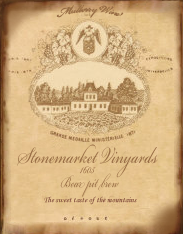
<style>
.page{position:relative;width:183px;height:234px}
.page>*{position:absolute;margin:0}
.t1{font:16px "BickhamScriptPro-Regular";color:#986d44;scale:0.67 1}
.t2{font:36px "BickhamScriptPro-Regular";color:#986d44;scale:0.67 1}
.t3{font:24px "BickhamScriptPro-Regular";color:#986d44;scale:0.67 1}
.t4{font:22px "BickhamScriptPro-Regular";color:#986d44;scale:0.67 1}
.t5{font:8px "MonotypeCorsiva"}
</style>
<div class="page">
<p class="t1" style="left:56px;top:4px;width:68px;height:14px">Mulberry Wine</p>
<p class="t2" style="left:17px;top:144px;width:141px;height:34px">Stonemarket Vinyards</p>
<p class="t3" style="left:60px;top:173px;width:59px;height:24px">Bear pit brew</p>
<p class="t4" style="left:80px;top:166px;width:16px;height:8px">1605</p>
<p class="t5" style="left:44px;top:196px;width:93px;height:9px">The sweet taste of the mountains</p>
</div>
